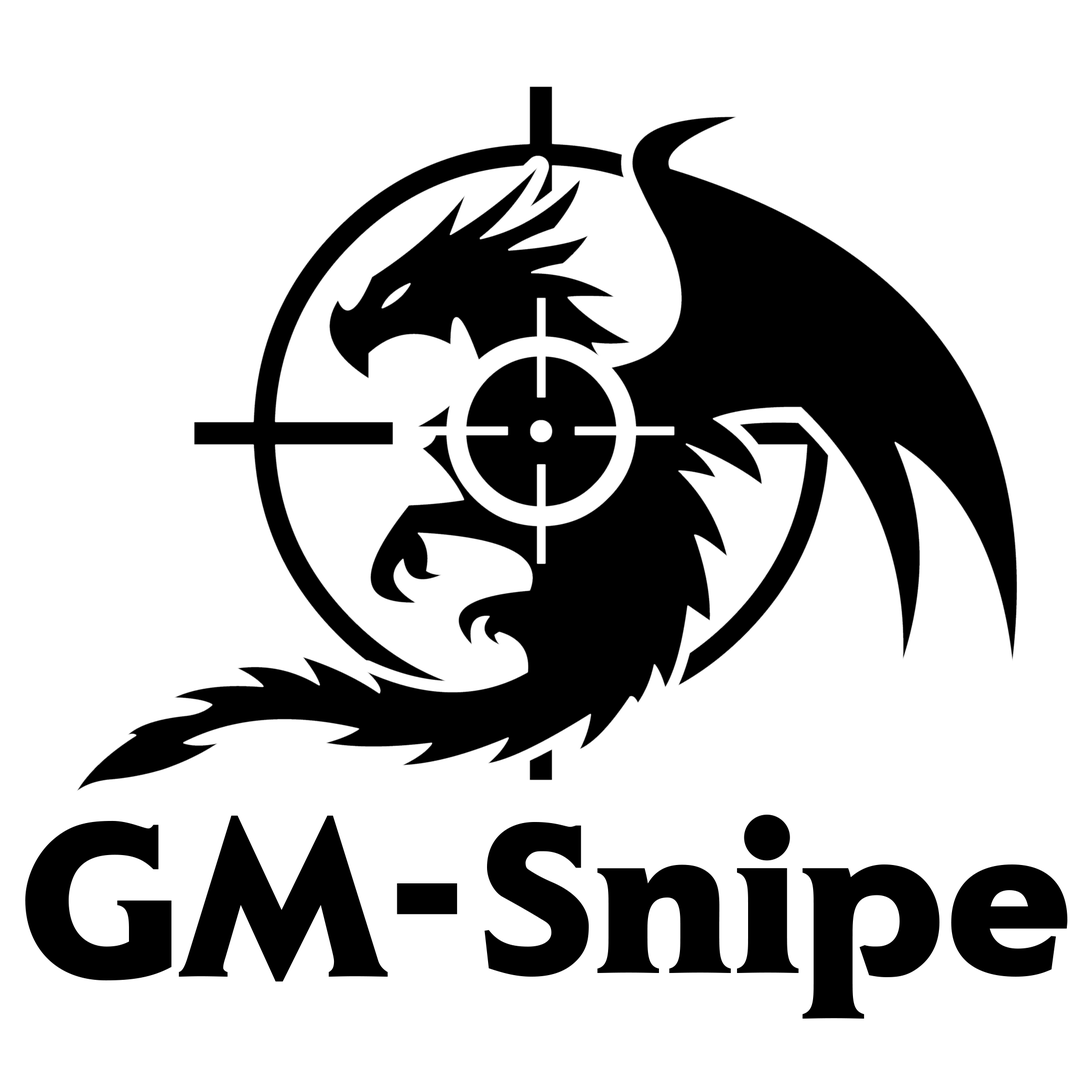
<style>
.page{position:relative;width:1092px;height:1092px;background:#ffffff}
.page>*{position:absolute;margin:0}
.t1{font:221.1px "ElanITCStd-Black";color:#000000}
</style>
<div class="page">
<p class="t1" style="left:484px;top:815px;width:583px;height:204px">Snipe</p>
</div>
